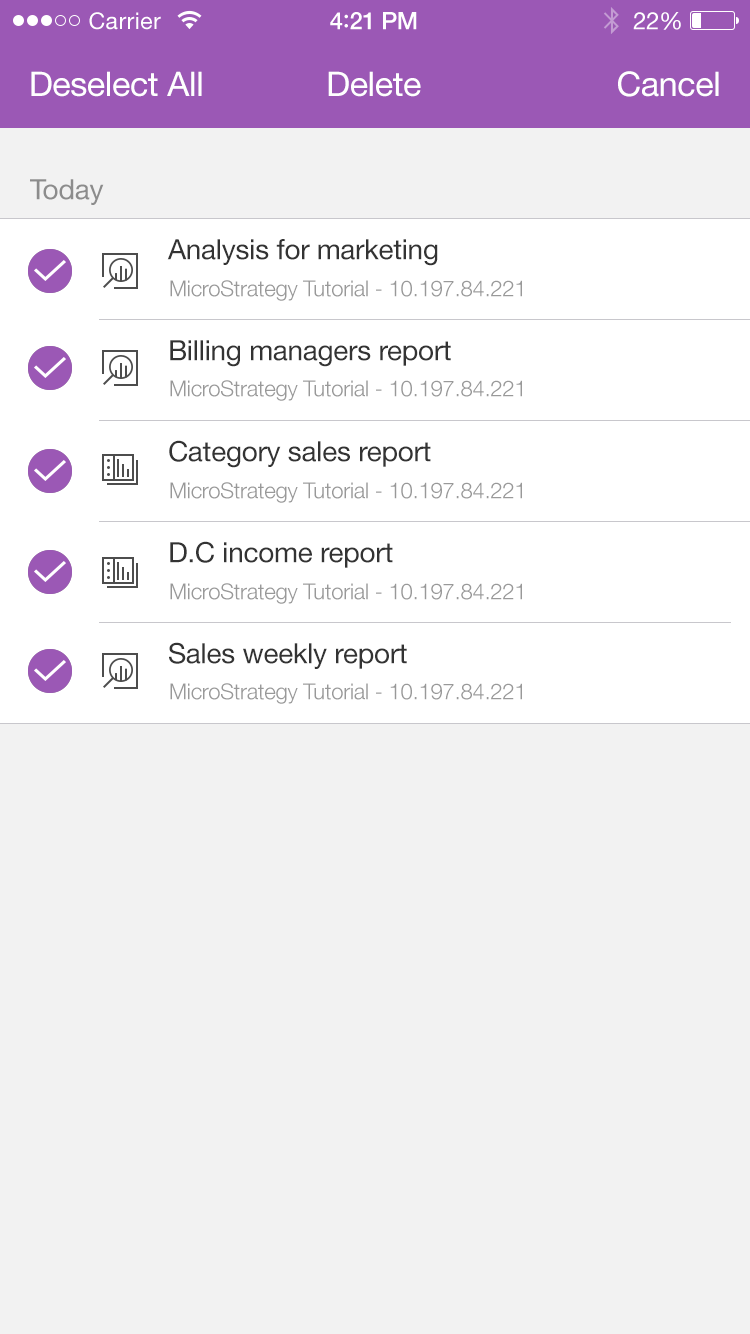
<style>
.page{position:relative;width:750px;height:1334px;background:#f2f2f2}
.page>*{position:absolute;margin:0}
.t1{font:23px "HelveticaNeue";letter-spacing:0.02em;color:#ffffff}
.t2{font:24px "HelveticaNeue-Medium";letter-spacing:-0.02em;color:#ffffff}
.t3{font:26px "Avenir-Medium";letter-spacing:-0.02em;color:#ffffff}
.t4{font:24px "HelveticaNeue";letter-spacing:-0.02em;color:#ffffff}
.t5{font:34px "HelveticaNeue";letter-spacing:-0.01em;color:#ffffff}
.t6{font:28px "HelveticaNeue";letter-spacing:-0.01em;color:#8c8c8c}
.t7{font:28px "HelveticaNeue";letter-spacing:-0.01em;color:#333333}
.t8{font:22px "HelveticaNeue-Light";letter-spacing:-0.01em;color:#999999}
</style>
<div class="page">
<p class="t1" style="left:89px;top:12px;width:72px;height:18px">Carrier</p>
<p class="t2" style="left:330px;top:12px;width:87px;height:18px">4<span class="t3">:</span>21 PM</p>
<p class="t4" style="left:633px;top:12px;width:48px;height:18px">22%</p>
<p class="t5" style="left:31px;top:71px;width:171px;height:26px">Deselect All</p>
<p class="t5" style="left:328px;top:71px;width:93px;height:26px">Delete</p>
<p class="t5" style="left:618px;top:71px;width:101px;height:26px">Cancel</p>
<p class="t6" style="left:30px;top:179px;width:74px;height:26px">Today</p>
<p class="t7" style="left:167px;top:239px;width:271px;height:27px">Analysis for marketing</p>
<p class="t8" style="left:170px;top:280px;width:352px;height:21px">MicroStrategy Tutorial - 10.197.84.221</p>
<p class="t7" style="left:170px;top:340px;width:281px;height:27px">Billing managers report</p>
<p class="t8" style="left:170px;top:380px;width:352px;height:21px">MicroStrategy Tutorial - 10.197.84.221</p>
<p class="t7" style="left:169px;top:440px;width:262px;height:28px">Category sales report</p>
<p class="t8" style="left:170px;top:482px;width:352px;height:21px">MicroStrategy Tutorial - 10.197.84.221</p>
<p class="t7" style="left:170px;top:541px;width:223px;height:27px">D.C income report</p>
<p class="t8" style="left:170px;top:583px;width:352px;height:21px">MicroStrategy Tutorial - 10.197.84.221</p>
<p class="t7" style="left:169px;top:642px;width:238px;height:27px">Sales weekly report</p>
<p class="t8" style="left:170px;top:683px;width:352px;height:21px">MicroStrategy Tutorial - 10.197.84.221</p>
</div>
